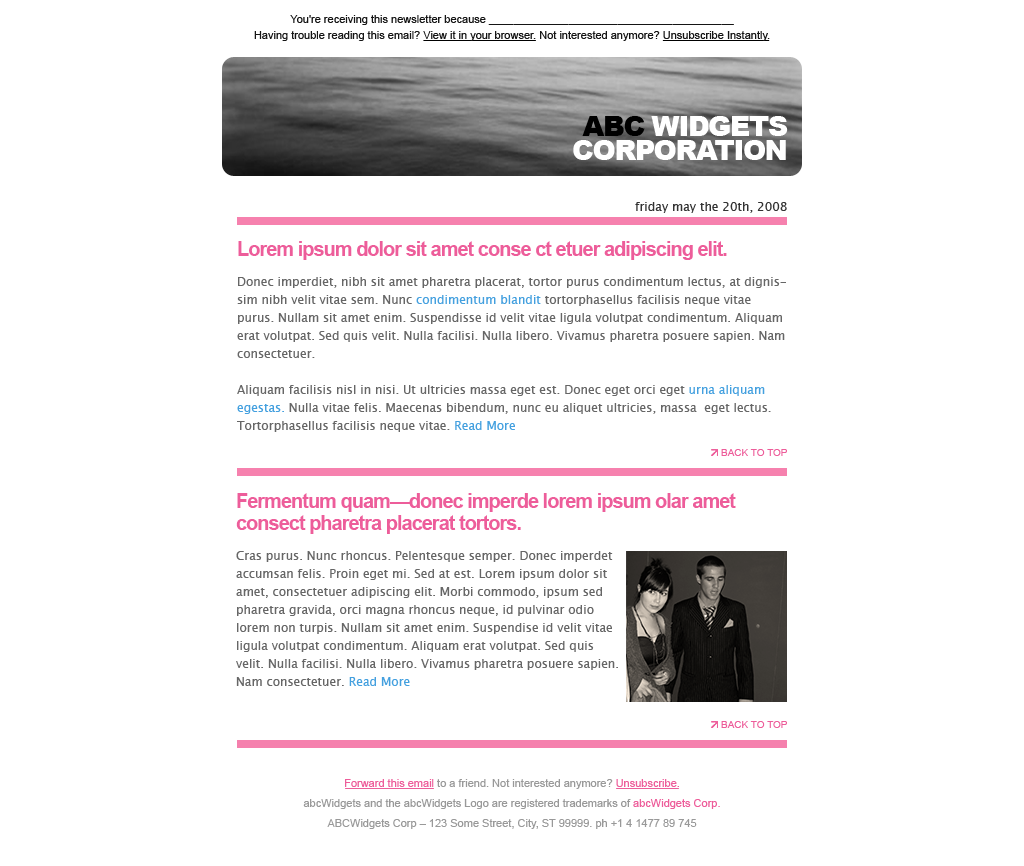
<style>
.page{position:relative;width:1024px;height:866px;background:#ffffff}
.page>*{position:absolute;margin:0}
.t1{font:11px/16px "ArialMT";color:#151515}
.t2{font:28px/20px "Arial-Black";letter-spacing:-0.05em;color:#ffffff;text-transform:uppercase}
.t3{font:28px/20px "Arial-Black";letter-spacing:-0.05em;color:#000000;text-transform:uppercase}
.t4{font:12px "LucidaGrande";color:#333333}
.t5{font:12px/18px "LucidaGrande";color:#666666}
.t6{font:20px/22px "Arial-BoldMT";letter-spacing:-0.05em;color:#ed5d9a}
.t7{font:12px/18px "LucidaGrande";color:#44a0df}
.t8{font:10px "ArialMT";color:#ed5d9a}
.t9{font:11px/16px "ArialMT";color:#999999}
.t10{font:11px/16px "ArialMT";color:#ed5d9a}
</style>
<div class="page">
<p class="t1" style="left:254px;top:15px;width:516px;height:26px;text-align:center">You're receiving this newsletter because ________________________________________<br>Having trouble reading this email? View it in your browser. Not interested anymore? Unsubscribe Instantly.</p>
<p class="t2" style="left:573px;top:116px;width:215px;height:44px;text-align:right"><span class="t3">ABC </span>WIDGETS<br>CORPORATION</p>
<p class="t4" style="left:635px;top:202px;width:152px;height:11px">friday may the 20th, 2008</p>
<p class="t5" style="left:237px;top:241px;width:549px;height:191px"><span class="t6">Lorem ipsum dolor sit amet conse ct etuer adipiscing elit.   <br></span>Donec imperdiet, nibh sit amet pharetra placerat, tortor purus condimentum lectus, at dignissim nibh velit vitae sem. Nunc <span class="t7">condimentum blandit</span> tortorphasellus facilisis neque vitae purus. Nullam sit amet enim. Suspendisse id velit vitae ligula volutpat condimentum. Aliquam erat volutpat. Sed quis velit. Nulla facilisi. Nulla libero. Vivamus pharetra posuere sapien. Nam consectetuer.<br><br>Aliquam facilisis nisl in nisi. Ut ultricies massa eget est. Donec eget orci eget <span class="t7">urna aliquam egestas.</span> Nulla vitae felis. Maecenas bibendum, nunc eu aliquet ultricies, massa  eget lectus. Tortorphasellus facilisis neque vitae. <span class="t7">Read More</span></p>
<p class="t8" style="left:721px;top:449px;width:66px;height:7px">BACK TO TOP</p>
<p class="t5" style="left:236px;top:493px;width:500px;height:193px"><span class="t6">Fermentum quam—donec imperde lorem ipsum olar amet consect pharetra placerat tortors.<br></span>Cras purus. Nunc rhoncus. Pelentesque semper. Donec imperdet<br>accumsan felis. Proin eget mi. Sed at est. Lorem ipsum dolor sit <br>amet, consectetuer adipiscing elit. Morbi commodo, ipsum sed <br>pharetra gravida, orci magna rhoncus neque, id pulvinar odio <br>lorem non turpis. Nullam sit amet enim. Suspendise id velit vitae <br>ligula volutpat condimentum. Aliquam erat volutpat. Sed quis <br>velit. Nulla facilisi. Nulla libero. Vivamus pharetra posuere sapien. <br>Nam consectetuer. <span class="t7">Read More</span></p>
<p class="t8" style="left:721px;top:721px;width:66px;height:7px">BACK TO TOP</p>
<p class="t9" style="left:303px;top:779px;width:417px;height:50px;text-align:center"><span class="t10">Forward this email</span> to a friend. Not interested anymore? <span class="t10">Unsubscribe.   <br></span>abcWidgets and the abcWidgets Logo are registered trademarks of <span class="t10">abcWidgets Corp. <br></span>ABCWidgets Corp – 123 Some Street, City, ST 99999. ph +1 4 1477 89 745</p>
</div>
